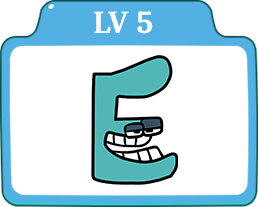
<style>
.page{position:relative;width:258px;height:207px;background:#ffffff}
.page>*{position:absolute;margin:0}
.t1{font:32px "Caladea-Bold";color:#ffffff}
</style>
<div class="page">
<p class="t1" style="left:94px;top:11px;width:59px;height:23px">LV 5</p>
</div>
